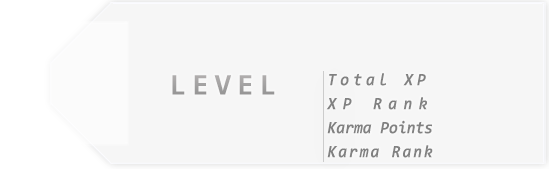
<style>
.page{position:relative;width:549px;height:169px;background:#f6f6f6}
.page>*{position:absolute;margin:0}
.t1{font:30px "Consolas-Bold";letter-spacing:0.2em;color:#a2a1a1}
.t2{font:17.6px/24px "Consolas-BoldItalic";color:#818181;scale:0.91 1}
.t3{font:17.6px/24px "Consolas-BoldItalic";letter-spacing:0.25em;color:#818181;scale:0.91 1}
.t4{font:17.6px/24px "Consolas-BoldItalic";letter-spacing:0.4em;color:#818181;scale:0.91 1}
.t5{font:17.6px/24px "Consolas-BoldItalic";letter-spacing:0.12em;color:#818181;scale:0.91 1}
</style>
<div class="page">
<p class="t1" style="left:172px;top:75px;width:103px;height:20px">LEVEL</p>
<p class="t2" style="left:326px;top:73px;width:107px;height:85px"><span class="t3">Total XP<br></span><span class="t4">XP Rank<br></span>Karma Points<br><span class="t5">Karma Rank</span></p>
</div>
